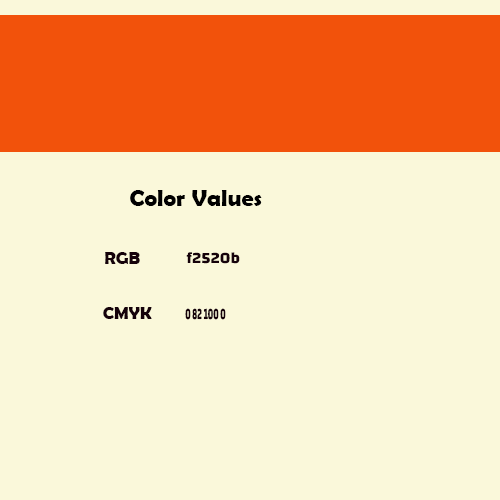
<style>
.page{position:relative;width:500px;height:500px;background:#faf8da}
.page>*{position:absolute;margin:0}
.t1{font:24px "BerlinSansFBDemi-Bold";color:#000000}
.t2{font:18px "BerlinSansFBDemi-Bold";color:#15020a}
.t3{font:16px "Changa-Bold";color:#15020a}
.t4{font:16px "Changa-Bold";color:#15020a;scale:0.51 1}
</style>
<div class="page">
<p class="t1" style="left:130px;top:190px;width:132px;height:16px">Color Values</p>
<p class="t2" style="left:105px;top:252px;width:35px;height:12px">RGB</p>
<p class="t3" style="left:186px;top:252px;width:54px;height:12px">f2520b</p>
<p class="t2" style="left:103px;top:307px;width:49px;height:12px">CMYK</p>
<p class="t4" style="left:185px;top:308px;width:41px;height:12px">0 82 100 0</p>
</div>
